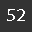
<style>
.page{position:relative;width:32px;height:32px;background:#333333}
.page>*{position:absolute;margin:0}
.t1{font:17.8px "MyriadPro-Regular";color:#ffffff;scale:1.12 1}
</style>
<div class="page">
<p class="t1" style="left:7px;top:9px;width:18px;height:12px">52</p>
</div>
